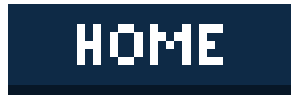
<style>
.page{position:relative;width:300px;height:100px;background:#0e2a46}
.page>*{position:absolute;margin:0}
.t1{font:65px "Pixelated";color:#ffffff}
</style>
<div class="page">
<p class="t1" style="left:77px;top:24px;width:146px;height:41px">HOME</p>
</div>
